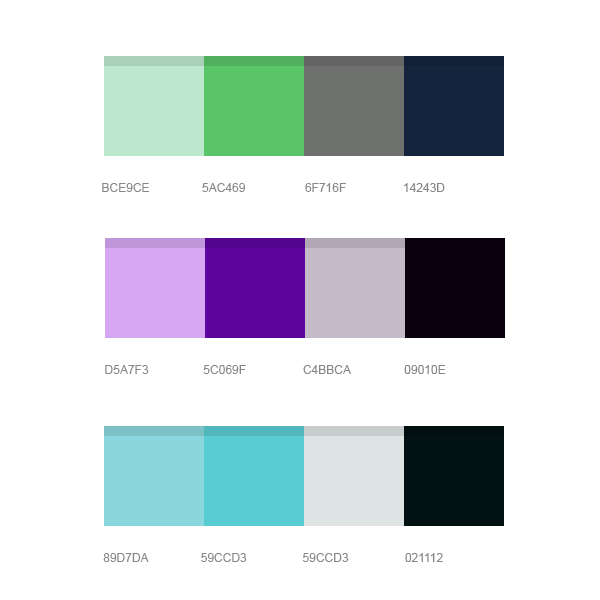
<style>
.page{position:relative;width:600px;height:600px;background:#ffffff}
.page>*{position:absolute;margin:0}
.t1{font:12px "ArialMT";color:#878787;text-transform:uppercase}
</style>
<div class="page">
<p class="t1" style="left:102px;top:183px;width:47px;height:9px">bce9ce</p>
<p class="t1" style="left:202px;top:183px;width:43px;height:9px">5ac469</p>
<p class="t1" style="left:305px;top:183px;width:41px;height:9px">6f716f</p>
<p class="t1" style="left:404px;top:183px;width:41px;height:9px">14243d</p>
<p class="t1" style="left:105px;top:365px;width:44px;height:9px">d5a7f3</p>
<p class="t1" style="left:203px;top:365px;width:43px;height:9px">5c069f</p>
<p class="t1" style="left:303px;top:365px;width:48px;height:9px">c4bbca</p>
<p class="t1" style="left:404px;top:365px;width:42px;height:9px">09010e</p>
<p class="t1" style="left:103px;top:553px;width:46px;height:9px">89d7da</p>
<p class="t1" style="left:201px;top:553px;width:46px;height:9px">59ccd3</p>
<p class="t1" style="left:302px;top:553px;width:47px;height:9px">59ccd3</p>
<p class="t1" style="left:405px;top:553px;width:38px;height:9px">021112</p>
</div>
